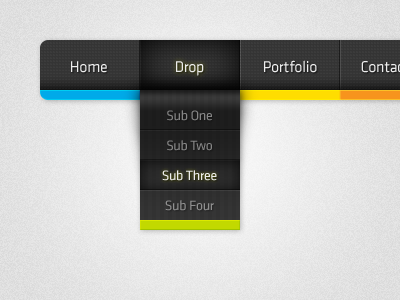
<style>
.page{position:relative;width:400px;height:300px}
.page>*{position:absolute;margin:0}
.t1{font:16px "Klavika-Regular";letter-spacing:-0.02em;color:#ebebeb}
.t2{font:14px "Klavika-Regular";letter-spacing:-0.02em;color:#858585}
.t3{font:14px "Klavika-Regular";letter-spacing:-0.02em;color:#868686}
.t4{font:14px "Klavika-Regular";letter-spacing:-0.02em;color:#ebebeb}
.t5{font:14px "Klavika-Regular";letter-spacing:-0.02em;color:#8f8f8f}
</style>
<div class="page">
<p class="t1" style="left:71px;top:61px;width:36px;height:12px">Home</p>
<p class="t1" style="left:176px;top:61px;width:28px;height:15px">Drop</p>
<p class="t1" style="left:264px;top:60px;width:53px;height:13px">Portfolio</p>
<p class="t2" style="left:167px;top:110px;width:45px;height:11px">Sub One</p>
<p class="t3" style="left:167px;top:140px;width:45px;height:11px">Sub Two</p>
<p class="t4" style="left:162px;top:170px;width:55px;height:11px">Sub Three</p>
<p class="t5" style="left:165px;top:200px;width:49px;height:11px">Sub Four</p>
</div>
